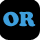
<style>
.page{position:relative;width:40px;height:40px;background:#000000}
.page>*{position:absolute;margin:0}
.t1{font:20px "CooperBlackStd";color:#3e9fdd}
</style>
<div class="page">
<p class="t1" style="left:3px;top:11px;width:33px;height:16px">OR</p>
</div>
